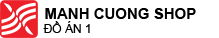
<style>
.page{position:relative;width:219px;height:38px;background:#ffffff}
.page>*{position:absolute;margin:0}
.t1{font:15px "Arial-BoldMT";color:#000000}
.t2{font:12px "ArialMT";color:#000000}
</style>
<div class="page">
<p class="t1" style="left:45px;top:8px;width:151px;height:11px">MANH CUONG SHOP</p>
<p class="t2" style="left:43px;top:21px;width:47px;height:12px">ĐỒ ÁN 1</p>
</div>
